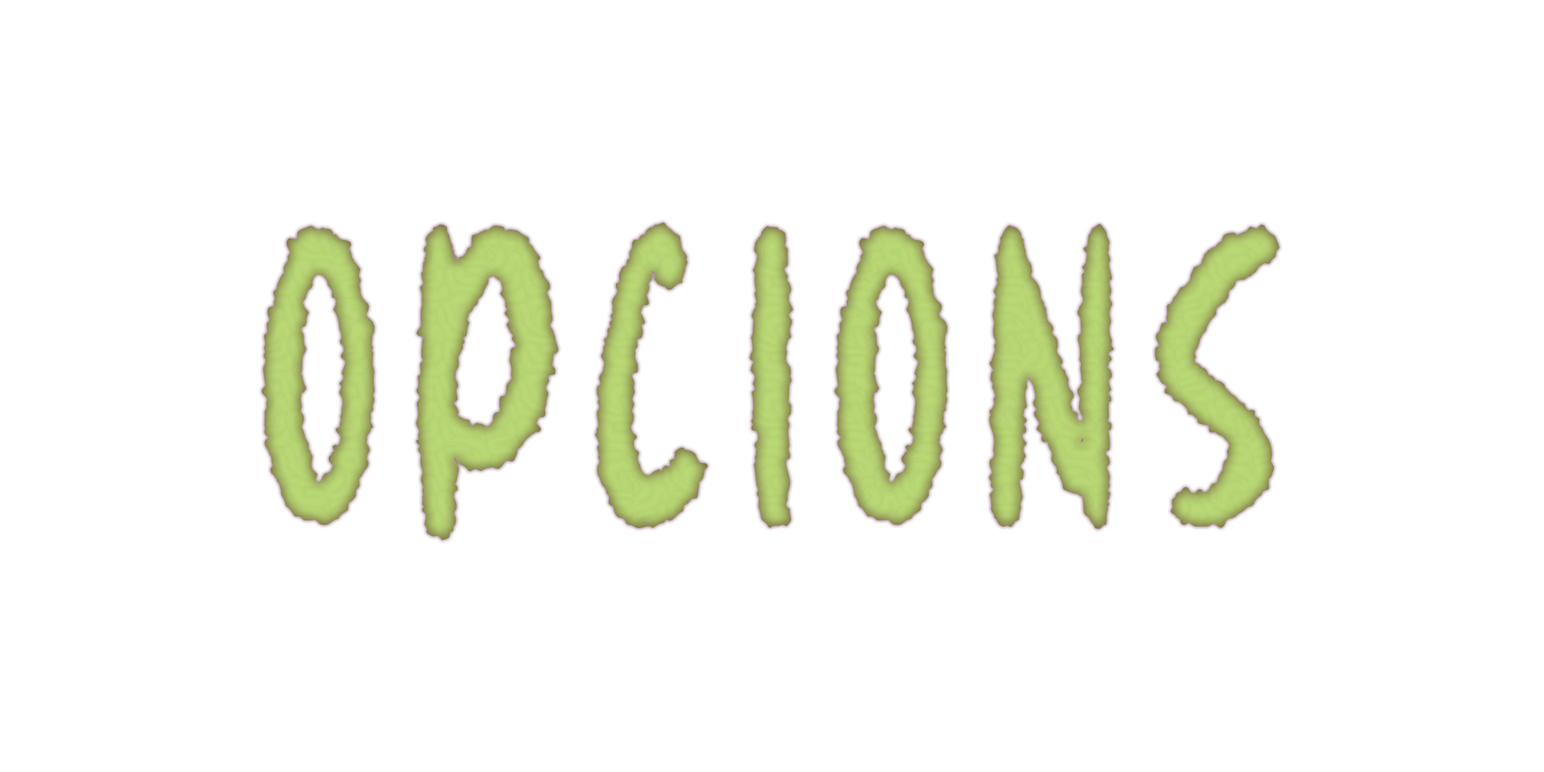
<style>
.page{position:relative;width:1544px;height:772px;background:#ffffff}
.page>*{position:absolute;margin:0}
.t1{font:321.7px "Metalien";letter-spacing:0.1em;color:#b7d974}
</style>
<div class="page">
<p class="t1" style="left:262px;top:222px;width:1018px;height:319px">Opcions</p>
</div>
